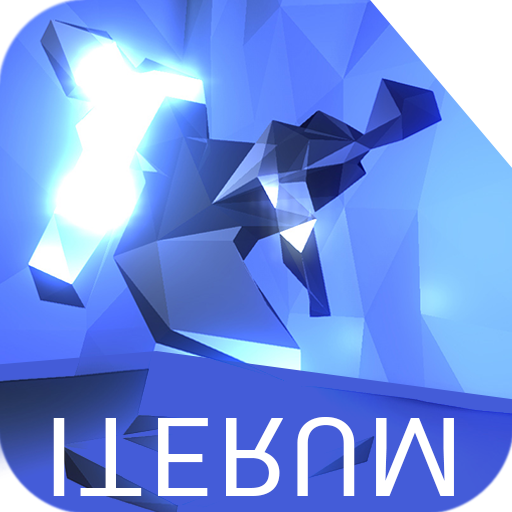
<style>
.page{position:relative;width:512px;height:512px}
.page>*{position:absolute;margin:0}
.t1{font:110px "Roboto-Regular";letter-spacing:0.05em;color:#ffffff}
</style>
<div class="page">
<p class="t1" style="left:53px;top:417px;width:401px;height:79px">ITERUM</p>
</div>
